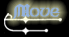
<style>
.page{position:relative;width:69px;height:37px;background:#000000}
.page>*{position:absolute;margin:0}
.t1{font:18px "Celtic-CondensedNormal";color:#94b2da}
.t2{font:18px "CathedralExtendedNormal";color:#94b2da}
</style>
<div class="page">
<p class="t1" style="left:13px;top:4px;width:47px;height:15px"><span class="t2">M</span>ove</p>
</div>
